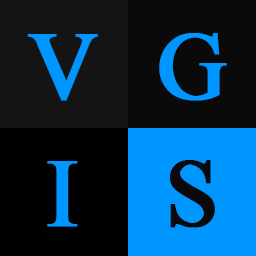
<style>
.page{position:relative;width:256px;height:256px;background:#0096ff}
.page>*{position:absolute;margin:0}
.t1{font:96px "TimesNewRomanPSMT";color:#0096ff;font-weight:bold}
.t2{font:96px "TimesNewRomanPSMT";color:#0a0a0a;font-weight:bold}
</style>
<div class="page">
<p class="t1" style="left:27px;top:34px;width:71px;height:67px">V</p>
<p class="t1" style="left:159px;top:33px;width:68px;height:68px">G</p>
<p class="t1" style="left:47px;top:161px;width:31px;height:66px">I</p>
<p class="t2" style="left:170px;top:160px;width:45px;height:68px">S</p>
</div>
